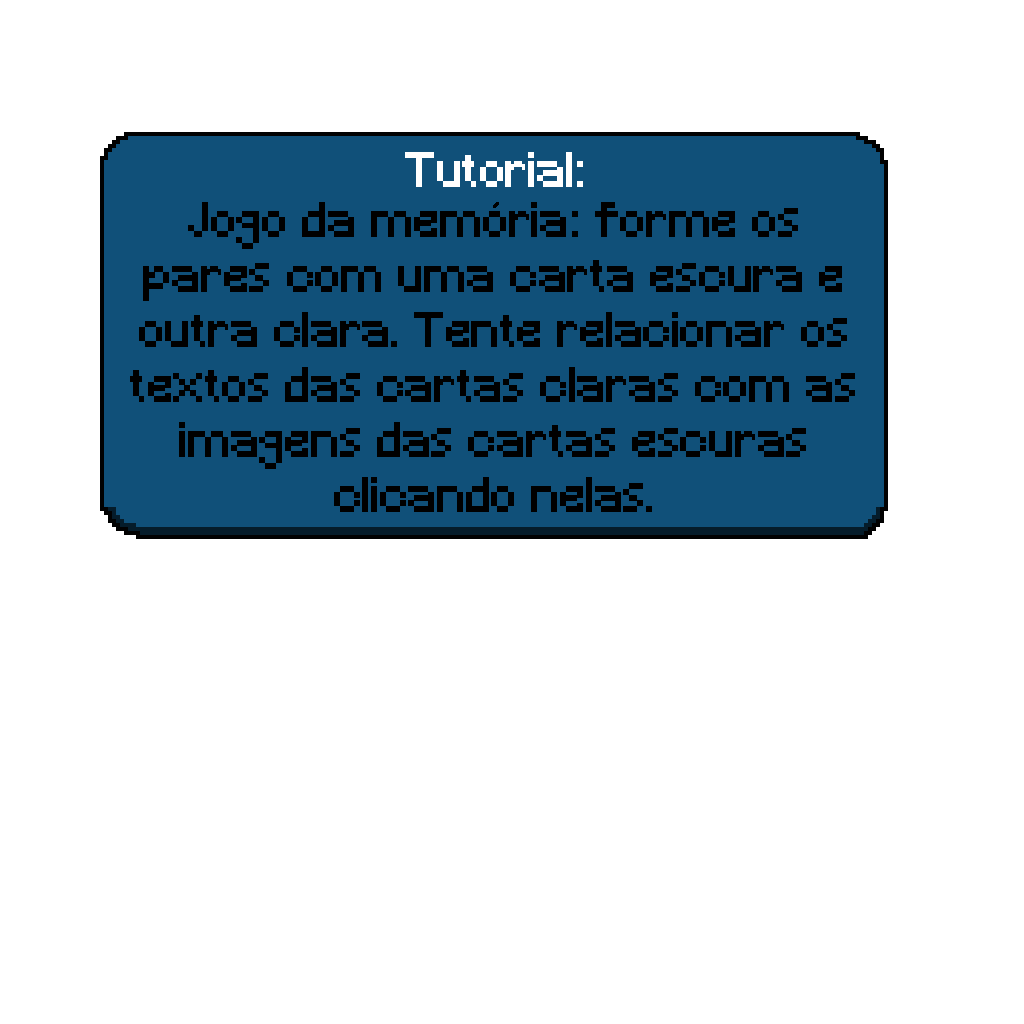
<style>
.page{position:relative;width:1024px;height:1024px;background:#ffffff}
.page>*{position:absolute;margin:0}
.t1{font:45.8px "Minecraft";color:#ffffff}
.t2{font:45.8px "Minecraft";color:#000000}
</style>
<div class="page">
<p class="t1" style="left:405px;top:152px;width:178px;height:35px">Tutorial:</p>
<p class="t2" style="left:130px;top:202px;width:725px;height:310px;text-align:center">Jogo da memoria: forme os pares com uma carta escura e outra clara. Tente relacionar os textos das cartas claras com as imagens das cartas escuras clicando nelas.</p>
</div>
